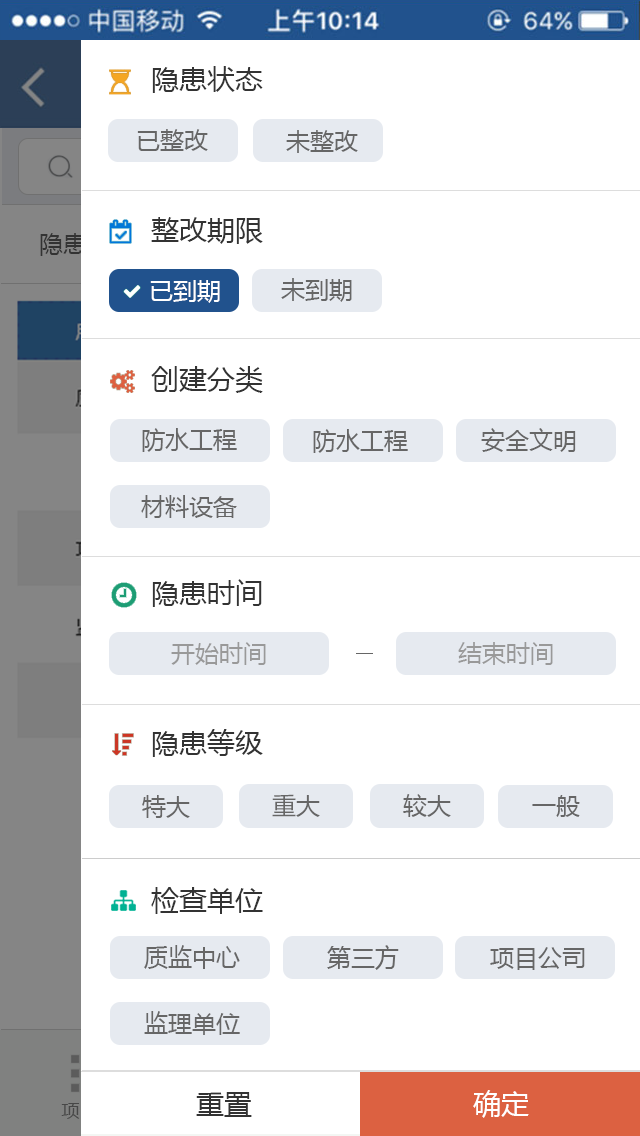
<style>
.page{position:relative;width:640px;height:1136px;background:#ffffff}
.page>*{position:absolute;margin:0}
.t1{font:28px "MicrosoftYaHei";color:#333333}
.t2{font:24px "MicrosoftYaHei";color:#666666}
.t3{font:24px "MicrosoftYaHei"}
.t4{font:24px "MicrosoftYaHei";color:#ffffff}
.t5{font:24px "MicrosoftYaHei";color:#999999}
.t6{font:28px "MicrosoftYaHei";color:#ffffff}
</style>
<div class="page">
<p class="t1" style="left:152px;top:66px;width:111px;height:27px">隐患状态</p>
<p class="t2" style="left:137px;top:129px;width:71px;height:22px">已整改</p>
<p class="t2" style="left:286px;top:130px;width:72px;height:23px">未整改</p>
<p class="t1" style="left:151px;top:217px;width:112px;height:27px">整改期限</p>
<p class="t3" style="left:40px;top:232px;width:95px;height:24px">隐患状态</p>
<p class="t4" style="left:150px;top:280px;width:70px;height:23px">已到期</p>
<p class="t2" style="left:281px;top:278px;width:71px;height:24px">未到期</p>
<p class="t1" style="left:151px;top:366px;width:112px;height:27px">创建分类</p>
<p class="t2" style="left:142px;top:428px;width:95px;height:24px">防水工程</p>
<p class="t2" style="left:313px;top:429px;width:95px;height:24px">防水工程</p>
<p class="t2" style="left:481px;top:428px;width:95px;height:24px">安全文明</p>
<p class="t2" style="left:141px;top:495px;width:96px;height:23px">材料设备</p>
<p class="t1" style="left:152px;top:579px;width:110px;height:28px">隐患时间</p>
<p class="t5" style="left:171px;top:642px;width:95px;height:23px">开始时间</p>
<p class="t5" style="left:458px;top:642px;width:95px;height:23px">结束时间</p>
<p class="t1" style="left:152px;top:729px;width:111px;height:28px">隐患等级</p>
<p class="t2" style="left:142px;top:795px;width:48px;height:23px">特大</p>
<p class="t2" style="left:272px;top:794px;width:48px;height:23px">重大</p>
<p class="t2" style="left:403px;top:794px;width:48px;height:23px">较大</p>
<p class="t2" style="left:532px;top:795px;width:48px;height:22px">一般</p>
<p class="t1" style="left:151px;top:887px;width:112px;height:27px">检查单位</p>
<p class="t2" style="left:144px;top:945px;width:96px;height:24px">质监中心</p>
<p class="t2" style="left:327px;top:945px;width:72px;height:25px">第三方</p>
<p class="t2" style="left:490px;top:947px;width:95px;height:23px">项目公司</p>
<p class="t2" style="left:144px;top:1011px;width:96px;height:24px">监理单位</p>
<p class="t1" style="left:196px;top:1092px;width:56px;height:25px">重置</p>
<p class="t6" style="left:473px;top:1090px;width:56px;height:28px">确定</p>
</div>
